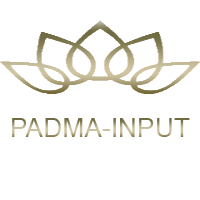
<style>
.page{position:relative;width:200px;height:200px;background:#ffffff}
.page>*{position:absolute;margin:0}
.t1{font:26.2px "ArialMT"}
</style>
<div class="page">
<p class="t1" style="left:12px;top:118px;width:178px;height:19px">PADMA-INPUT</p>
</div>
